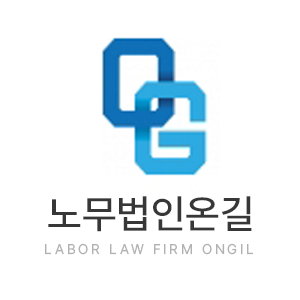
<style>
.page{position:relative;width:300px;height:300px;background:#ffffff}
.page>*{position:absolute;margin:0}
.t1{font:40px "Pretendard-Medium";color:#373737}
.t2{font:14px "Pretendard-Regular";letter-spacing:0.2em;color:#b2b2b2}
</style>
<div class="page">
<p class="t1" style="left:48px;top:196px;width:204px;height:36px">노무법인온길</p>
<p class="t2" style="left:45px;top:243px;width:208px;height:12px">LABOR LAW FIRM ONGIL</p>
</div>
